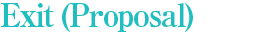
<style>
.page{position:relative;width:277px;height:34px;background:#ffffff}
.page>*{position:absolute;margin:0}
.t1{font:32px "RyuminPro-ExBold";letter-spacing:-0.06em;color:#21bebf;scale:0.96 1}
</style>
<div class="page">
<p class="t1" style="left:1px;top:3px;width:192px;height:29px">Exit (Proposal)</p>
</div>
